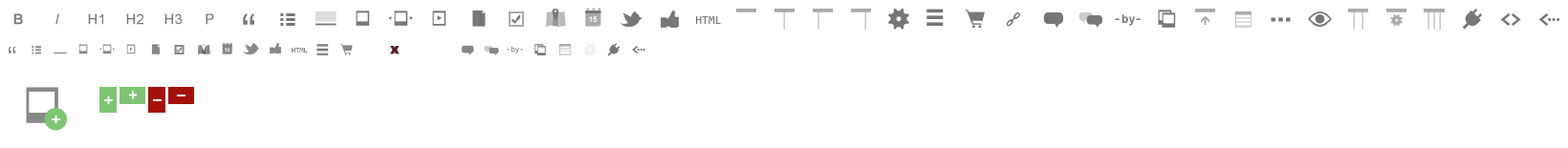
<style>
.page{position:relative;width:1568px;height:148px;background:#ffffff}
.page>*{position:absolute;margin:0}
.t1{font:14.3px "Arial-BoldMT";letter-spacing:0.01em;color:#777777}
.t2{font:14.3px "Arial-ItalicMT";letter-spacing:0.01em;color:#777777}
.t3{font:14.3px "ArialMT";letter-spacing:0.01em;color:#777777}
.t4{font:45.9px "ArialMT";letter-spacing:0.01em;color:#777777}
.t5{font:7.6px "Arial-BoldMT";letter-spacing:0.01em;color:#ffffff}
.t6{font:11.5px "Consolas";letter-spacing:0.01em;color:#777777}
.t7{font:11.5px "Arial-BoldMT";letter-spacing:0.01em;color:#777777}
.t8{font:28.7px "Share-Bold";letter-spacing:0.01em;color:#777777}
.t9{font:22.9px "Consolas-Bold";color:#777777}
.t10{font:17.2px "Consolas";letter-spacing:-0.3em;color:#777777}
.t11{font:28.7px "ArialMT";letter-spacing:0.01em;color:#888888}
.t12{font:4.8px "Arial-BoldMT";letter-spacing:0.01em;color:#ffffff}
.t13{font:7.2px "Consolas";letter-spacing:0.01em;color:#888888}
.t14{font:7.3px "Arial-BoldMT";letter-spacing:0.01em;color:#888888}
.t15{font:14.5px "Consolas-Bold";color:#777777}
.t16{font:10.9px "Consolas";letter-spacing:-0.3em;color:#777777}
.t17{font:17.2px "Consolas-Bold";letter-spacing:0.01em;color:#ffffff}
</style>
<div class="page">
<p class="t1" style="left:13px;top:13px;width:10px;height:12px">B</p>
<p class="t2" style="left:55px;top:13px;width:4px;height:12px">I</p>
<p class="t3" style="left:88px;top:13px;width:15px;height:12px">H1</p>
<p class="t3" style="left:126px;top:13px;width:17px;height:12px">H2</p>
<p class="t3" style="left:164px;top:13px;width:18px;height:12px">H3</p>
<p class="t3" style="left:206px;top:13px;width:8px;height:12px">P</p>
<p class="t4" style="left:243px;top:13px;width:11px;height:12px">“</p>
<p class="t5" style="left:589px;top:16px;width:9px;height:6px">15</p>
<p class="t6" style="left:696px;top:16px;width:25px;height:8px">HTML</p>
<p class="t7" style="left:1122px;top:14px;width:13px;height:12px">by</p>
<p class="t8" style="left:1271px;top:17px;width:20px;height:5px">...</p>
<p class="t9" style="left:1500px;top:13px;width:11px;height:13px">&lt;</p>
<p class="t9" style="left:1511px;top:13px;width:10px;height:13px;rotate:180deg">&lt;</p>
<p class="t9" style="left:1538px;top:13px;width:11px;height:13px">&lt;</p>
<p class="t10" style="left:1548px;top:18px;width:12px;height:3px">...</p>
<p class="t11" style="left:9px;top:46px;width:7px;height:8px">“</p>
<p class="t12" style="left:225px;top:48px;width:4px;height:4px">15</p>
<p class="t13" style="left:292px;top:48px;width:16px;height:5px">HTML</p>
<p class="t14" style="left:511px;top:46px;width:8px;height:8px">by</p>
<p class="t15" style="left:632px;top:46px;width:7px;height:8px">&lt;</p>
<p class="t16" style="left:638px;top:49px;width:7px;height:2px">...</p>
<p class="t17" style="left:52px;top:116px;width:8px;height:7px">+</p>
</div>
